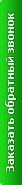
<style>
.page{position:relative;width:22px;height:185px}
.page>*{position:absolute;margin:0}
.t1{font:11px "Tahoma-Bold";color:#ffffff}
</style>
<div class="page">
<p class="t1" style="left:5px;top:13px;width:11px;height:159px;rotate:-90deg;opacity:0.9">Заказать обратный звонок</p>
</div>
